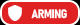
<style>
.page{position:relative;width:80px;height:25px;background:#e12222}
.page>*{position:absolute;margin:0}
.t1{font:12px "Bahnschrift-BoldSemiCondensed";letter-spacing:-0.025em;color:#ffffff}
</style>
<div class="page">
<p class="t1" style="left:31px;top:9px;width:36px;height:10px">ARMING</p>
</div>
